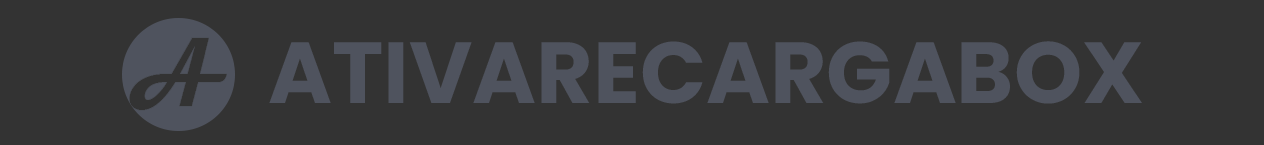
<style>
.page{position:relative;width:1264px;height:145px;background:#333333}
.page>*{position:absolute;margin:0}
.t1{font:86.6px "Poppins-Bold";color:#4f535e}
</style>
<div class="page">
<p class="t1" style="left:269px;top:41px;width:873px;height:63px">ATIVARECARGABOX</p>
</div>
